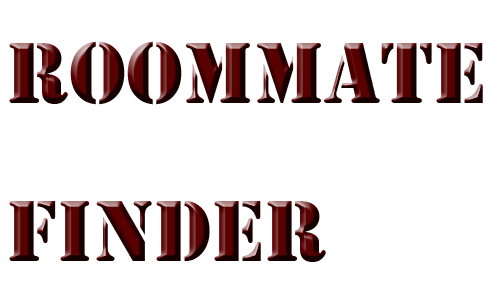
<style>
.page{position:relative;width:500px;height:300px;background:#ffffff}
.page>*{position:absolute;margin:0}
.t1{font:90px "Stencil"}
</style>
<div class="page">
<p class="t1" style="left:9px;top:41px;width:474px;height:221px">Roommate<br>Finder</p>
</div>
